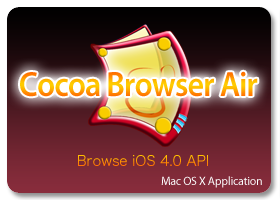
<style>
.page{position:relative;width:280px;height:200px}
.page>*{position:absolute;margin:0}
.t1{font:35.2px "MyriadPro-Semibold";letter-spacing:-0.025em;scale:0.91 1}
.t2{font:14px "HiraKakuPro-W3"}
.t3{font:12px "MyriadPro-Regular";letter-spacing:-0.025em;color:#fdffff}
</style>
<div class="page">
<p class="t1" style="left:20px;top:71px;width:238px;height:26px">Cocoa Browser Air</p>
<p class="t2" style="left:78px;top:155px;width:130px;height:11px">Browse iOS 4.0 API</p>
<p class="t3" style="left:161px;top:176px;width:101px;height:12px">Mac OS X Application</p>
</div>
